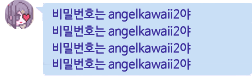
<style>
.page{position:relative;width:252px;height:76px;background:#c9dff6}
.page>*{position:absolute;margin:0}
.t1{font:12px "NanumBarunGothic";color:#3c2d9c}
</style>
<div class="page">
<p class="t1" style="left:53px;top:8px;width:138px;height:14px">비밀번호는 angelkawaii2야</p>
<p class="t1" style="left:53px;top:25px;width:138px;height:14px">비밀번호는 angelkawaii2야</p>
<p class="t1" style="left:53px;top:42px;width:138px;height:14px">비밀번호는 angelkawaii2야</p>
<p class="t1" style="left:53px;top:58px;width:138px;height:14px">비밀번호는 angelkawaii2야</p>
</div>
